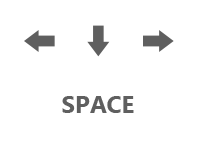
<style>
.page{position:relative;width:200px;height:150px;background:#ffffff}
.page>*{position:absolute;margin:0}
.t1{font:24px "SegoeUI-Bold";color:#5f5f5f}
</style>
<div class="page">
<p class="t1" style="left:62px;top:96px;width:72px;height:17px">SPACE</p>
</div>
